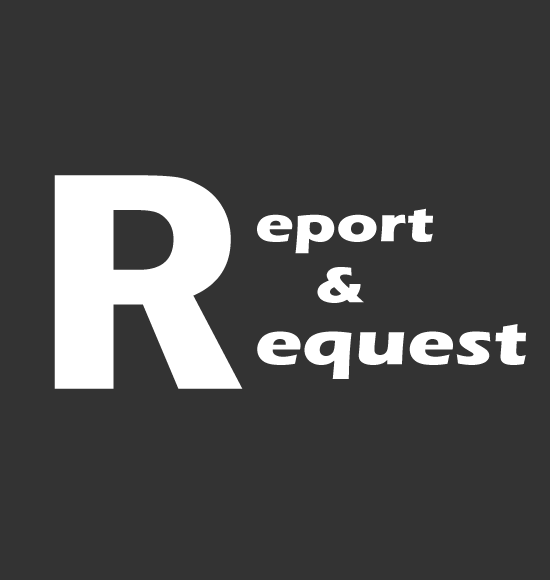
<style>
.page{position:relative;width:550px;height:580px;background:#333333}
.page>*{position:absolute;margin:0}
.t1{font:320px "FranklinGothic-DemiCond";color:#ffffff;scale:1.25 1}
.t2{font:52px "ErasITC-Bold";color:#ffffff;scale:1.25 1}
.t3{font:64px "ErasITC-Bold";color:#ffffff;scale:1.25 1}
</style>
<div class="page">
<p class="t1" style="left:54px;top:175px;width:189px;height:214px">R</p>
<p class="t2" style="left:257px;top:208px;width:176px;height:46px">eport</p>
<p class="t2" style="left:317px;top:267px;width:47px;height:36px">&amp;</p>
<p class="t3" style="left:257px;top:324px;width:269px;height:55px">equest</p>
</div>
